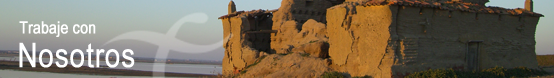
<style>
.page{position:relative;width:554px;height:78px}
.page>*{position:absolute;margin:0}
.t1{font:16.7px "ArialNarrow";color:#ffffff;font-weight:bold}
.t2{font:34px "ArialNarrow";color:#ffffff;font-weight:bold}
</style>
<div class="page">
<p class="t1" style="left:19px;top:21px;width:77px;height:16px">Trabaje con</p>
<p class="t2" style="left:19px;top:42px;width:116px;height:26px">Nosotros</p>
</div>
